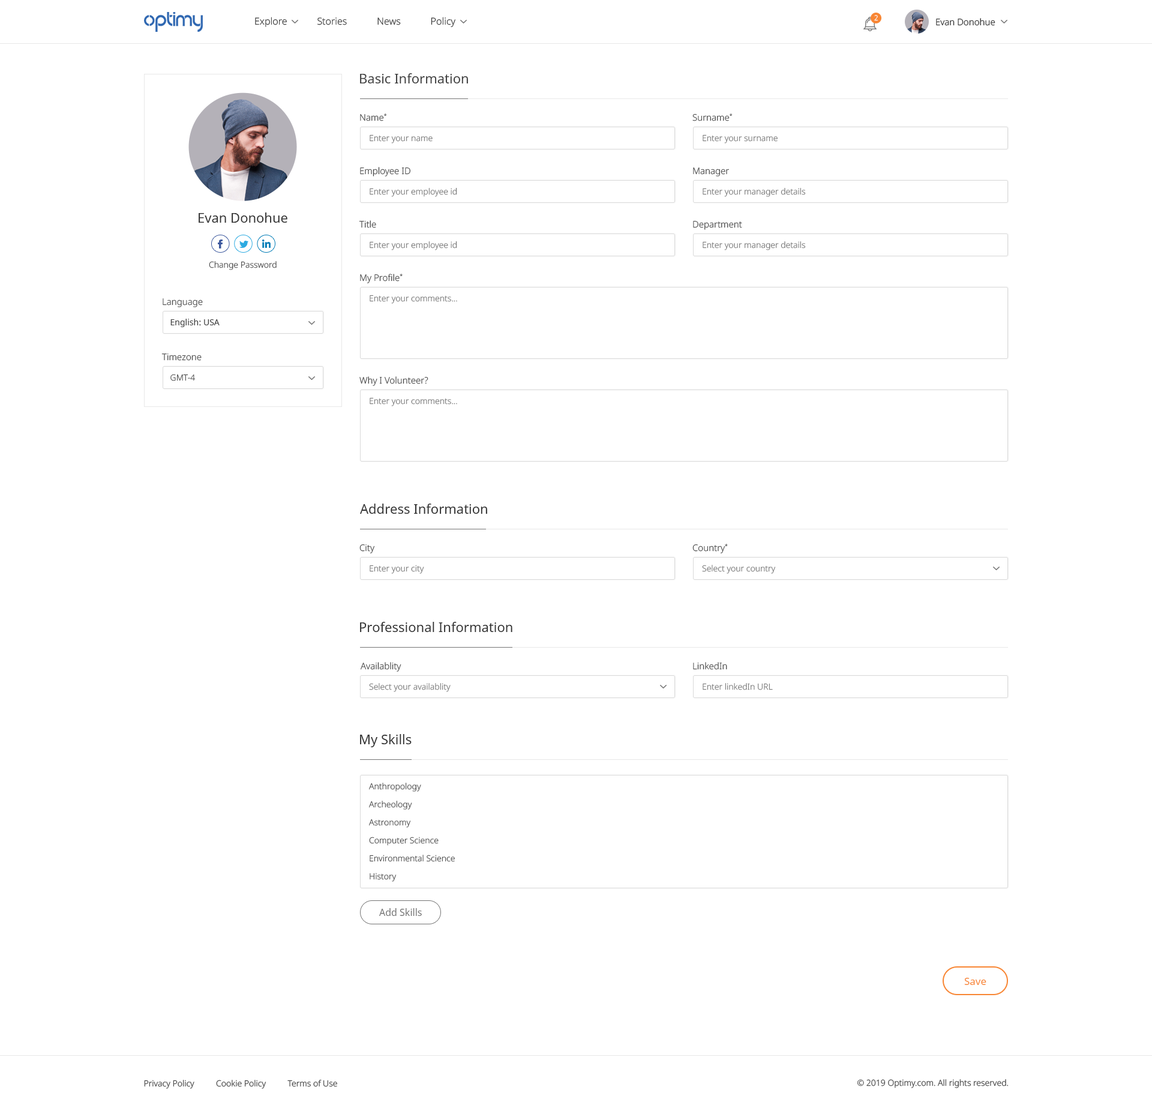
<style>
.page{position:relative;width:1152px;height:1111px;background:#ffffff}
.page>*{position:absolute;margin:0}
.t1{font:13.2px "NotoSans";color:#414141}
.t2{font:9px "NotoSans-Light";color:#414141}
.t3{font:8.4px "NotoSans-Light";color:#757575}
.t4{font:13.2px "NotoSans";color:#333333}
.t5{font:8.4px "NotoSans-Light";color:#414141}
.t6{font:8.4px "NotoSans";color:#414141}
.t7{font:8.4px/18px "NotoSans-Light";color:#414141}
.t8{font:9.6px "NotoSans";color:#757575}
.t9{font:10.2px "NotoSans";color:#f88634}
</style>
<div class="page">
<p class="t1" style="left:360px;top:73px;width:108px;height:10px">Basic Information</p>
<p class="t2" style="left:360px;top:113px;width:27px;height:8px">Name*</p>
<p class="t2" style="left:692px;top:113px;width:41px;height:8px">Surname*</p>
<p class="t3" style="left:370px;top:134px;width:63px;height:9px">Enter your name</p>
<p class="t3" style="left:703px;top:134px;width:75px;height:9px">Enter your surname</p>
<p class="t2" style="left:360px;top:167px;width:50px;height:9px">Employee ID</p>
<p class="t2" style="left:693px;top:167px;width:36px;height:9px">Manager</p>
<p class="t3" style="left:370px;top:188px;width:87px;height:9px">Enter your employee id</p>
<p class="t3" style="left:703px;top:188px;width:103px;height:9px">Enter your manager details</p>
<p class="t4" style="left:199px;top:212px;width:88px;height:11px">Evan Donohue</p>
<p class="t2" style="left:359px;top:220px;width:17px;height:8px">Title</p>
<p class="t2" style="left:693px;top:221px;width:49px;height:9px">Department</p>
<p class="t3" style="left:370px;top:241px;width:87px;height:9px">Enter your employee id</p>
<p class="t3" style="left:703px;top:241px;width:103px;height:9px">Enter your manager details</p>
<p class="t5" style="left:209px;top:261px;width:68px;height:9px">Change Password</p>
<p class="t2" style="left:360px;top:274px;width:43px;height:9px">My Profile*</p>
<p class="t2" style="left:163px;top:298px;width:40px;height:9px">Language</p>
<p class="t3" style="left:370px;top:295px;width:87px;height:9px">Enter your comments...</p>
<p class="t6" style="left:170px;top:319px;width:50px;height:8px">English: USA</p>
<p class="t2" style="left:161px;top:353px;width:41px;height:8px">Timezone</p>
<p class="t5" style="left:170px;top:374px;width:26px;height:7px">GMT-4</p>
<p class="t2" style="left:359px;top:376px;width:69px;height:10px">Why I Volunteer?</p>
<p class="t3" style="left:370px;top:397px;width:87px;height:9px">Enter your comments...</p>
<p class="t4" style="left:360px;top:503px;width:127px;height:11px">Address Information</p>
<p class="t2" style="left:359px;top:544px;width:16px;height:9px">City</p>
<p class="t2" style="left:692px;top:544px;width:36px;height:9px">Country*</p>
<p class="t3" style="left:370px;top:565px;width:54px;height:9px">Enter your city</p>
<p class="t3" style="left:702px;top:565px;width:74px;height:9px">Select your country</p>
<p class="t4" style="left:360px;top:622px;width:152px;height:10px">Professional Information</p>
<p class="t2" style="left:361px;top:662px;width:40px;height:9px">Availablity</p>
<p class="t2" style="left:693px;top:662px;width:34px;height:8px">LinkedIn</p>
<p class="t3" style="left:369px;top:683px;width:82px;height:9px">Select your availablity</p>
<p class="t3" style="left:703px;top:683px;width:70px;height:7px">Enter linkedIn URL</p>
<p class="t4" style="left:360px;top:734px;width:52px;height:13px">My Skills</p>
<p class="t7" style="left:369px;top:782px;width:86px;height:99px">Anthropology<br>Archeology<br>Astronomy<br>Computer Science<br>Environmental Science<br>History</p>
<p class="t8" style="left:379px;top:908px;width:43px;height:8px">Add Skills</p>
<p class="t9" style="left:964px;top:977px;width:22px;height:8px">Save</p>
</div>
